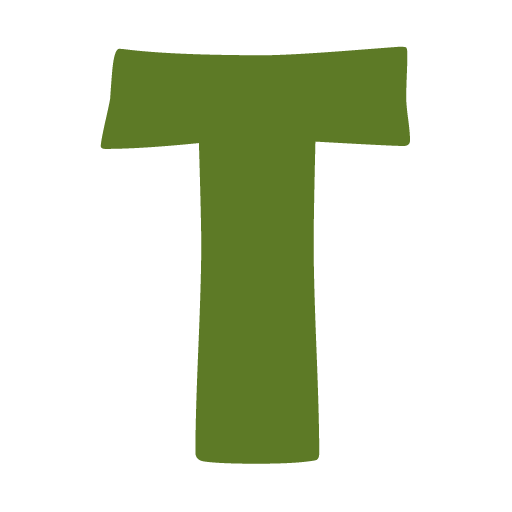
<style>
.page{position:relative;width:512px;height:512px;background:#ffffff}
.page>*{position:absolute;margin:0}
.t1{font:599.8px "BerlinSansFBDemi-Bold";color:#5d7a26}
</style>
<div class="page">
<p class="t1" style="left:100px;top:46px;width:310px;height:418px">T</p>
</div>
